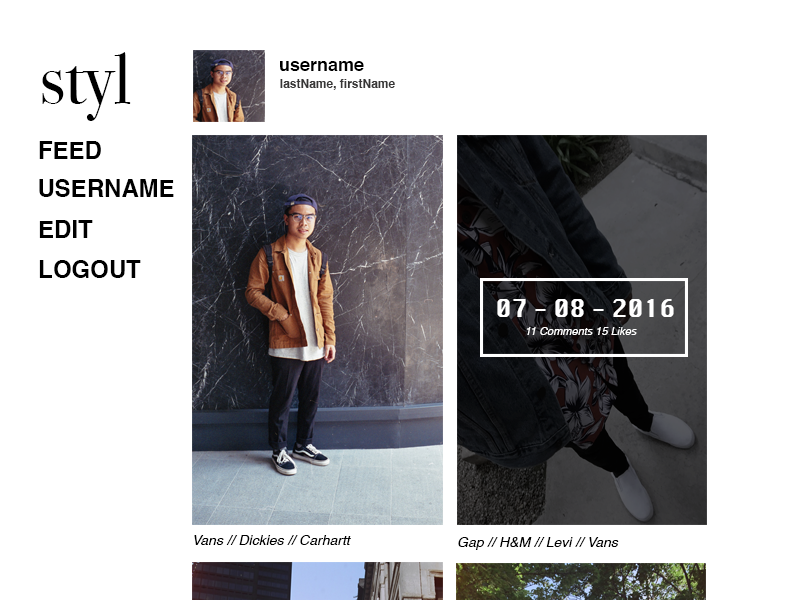
<style>
.page{position:relative;width:800px;height:600px;background:#ffffff}
.page>*{position:absolute;margin:0}
.t1{font:72px "BodoniSvtyTwoOSITCTT-Book";color:#000000}
.t2{font:18px "Helvetica-Bold";color:#000000}
.t3{font:12px "Helvetica-Bold";color:#373636}
.t4{font:24px "Helvetica-Bold";color:#000000}
.t5{font:24px "Silom";color:#ffffff}
.t6{font:11px "Helvetica-Oblique";color:#ffffff}
.t7{font:14px "Helvetica-Oblique";color:#000000}
</style>
<div class="page">
<p class="t1" style="left:42px;top:52px;width:89px;height:69px">styl</p>
<p class="t2" style="left:280px;top:61px;width:84px;height:10px">username</p>
<p class="t3" style="left:280px;top:79px;width:115px;height:11px">lastName, firstName</p>
<p class="t4" style="left:39px;top:141px;width:62px;height:18px">FEED</p>
<p class="t4" style="left:39px;top:179px;width:135px;height:18px">USERNAME</p>
<p class="t4" style="left:39px;top:220px;width:54px;height:18px">EDIT</p>
<p class="t4" style="left:39px;top:260px;width:102px;height:18px">LOGOUT</p>
<p class="t5" style="left:497px;top:299px;width:177px;height:18px">07 - 08 - 2016</p>
<p class="t6" style="left:526px;top:327px;width:111px;height:8px">11 Comments 15 Likes</p>
<p class="t7" style="left:194px;top:535px;width:157px;height:10px">Vans // Dickies // Carhartt</p>
<p class="t7" style="left:458px;top:537px;width:161px;height:13px">Gap // H&amp;M // Levi // Vans</p>
</div>
